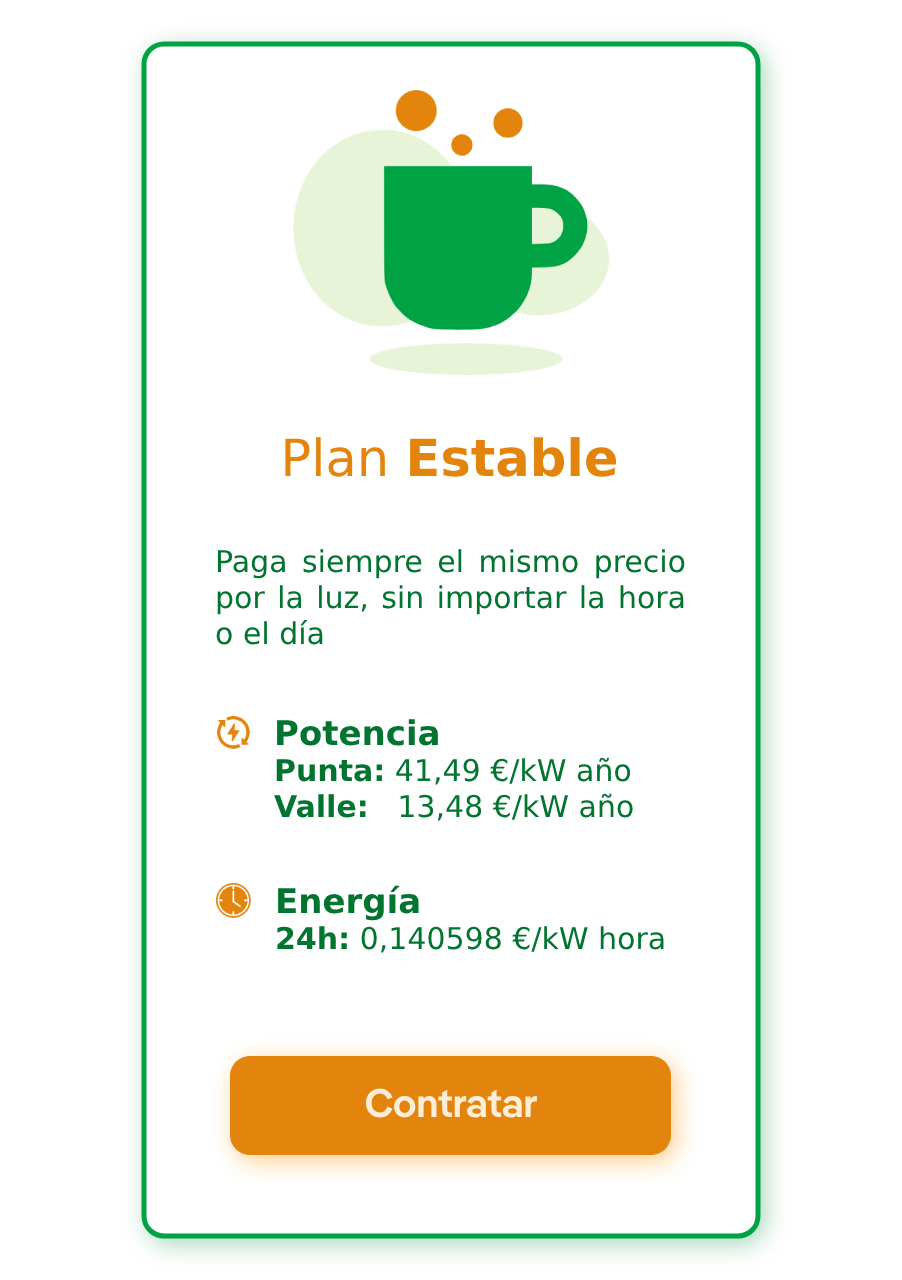
<style>
.page{position:relative;width:902px;height:1280px;background:#ffffff}
.page>*{position:absolute;margin:0}
.t1{font:51.1px "DejaVuSans-Bold";color:#e3850d}
.t2{font:51.1px "DejaVuSans";color:#e3850d}
.t3{font:30px "DejaVuSans";color:#01742f}
.t4{font:34px "DejaVuSans-Bold";color:#01742f}
.t5{font:30px "DejaVuSans-Bold";color:#01742f}
.t6{font:40px "IberPangea-SmBold";color:#feedd7}
</style>
<div class="page">
<p class="t1" style="left:285px;top:437px;width:332px;height:40px"><span class="t2">Plan </span>Estable</p>
<p class="t3" style="left:216px;top:549px;width:469px;height:96px;text-align:justify">Paga siempre el mismo precio por la luz, sin importar la hora o el día</p>
<p class="t3" style="left:274px;top:719px;width:359px;height:102px;text-align:justify"><span class="t4">Potencia<br></span><span class="t5">Punta: </span>41,49 €/kW año<br><span class="t5">Valle:   </span>13,48 €/kW año</p>
<p class="t3" style="left:277px;top:885px;width:387px;height:68px;text-align:justify"><span class="t4">Energía<br></span><span class="t5">24h: </span>0,140598 €/kW hora</p>
<p class="t6" style="left:365px;top:1088px;width:172px;height:30px">Contratar</p>
</div>
